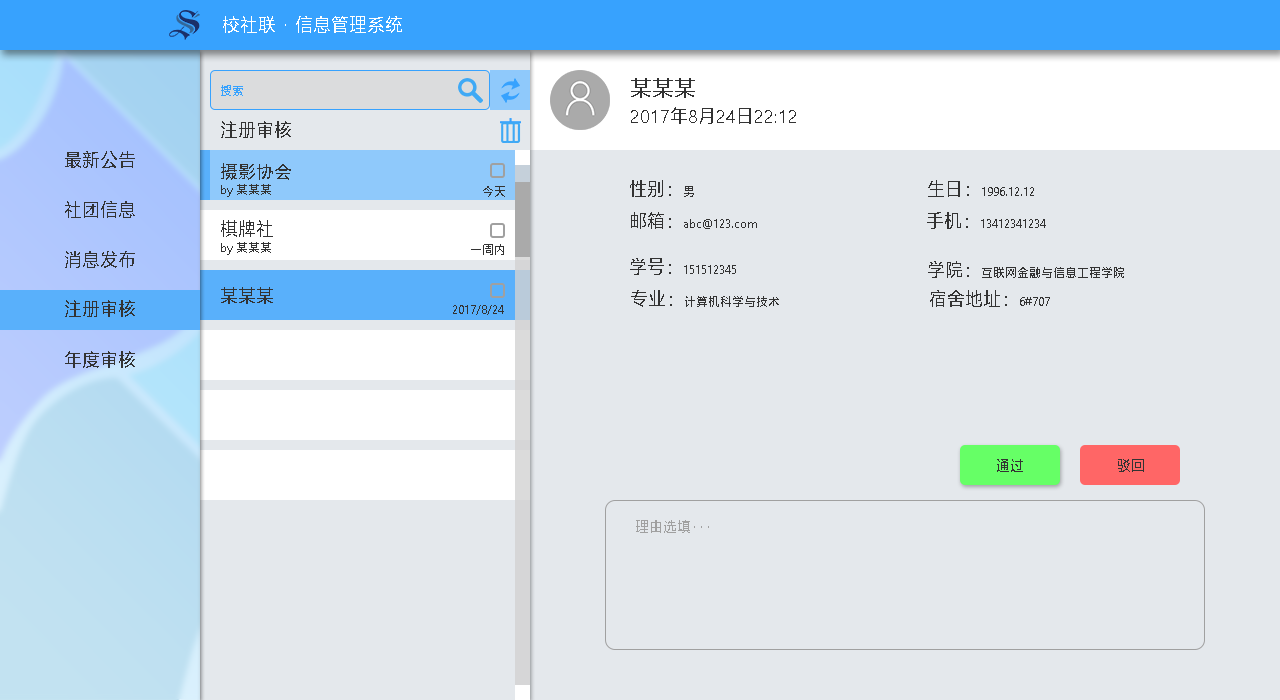
<style>
.page{position:relative;width:1280px;height:700px;background:#e4e8ec}
.page>*{position:absolute;margin:0}
.t1{font:18px "MicrosoftYaHei";color:#ffffff}
.t2{font:22px "MicrosoftYaHei";color:#333333}
.t3{font:12px "MicrosoftYaHei";color:#37a2fe}
.t4{font:18px "MicrosoftYaHei";color:#333333}
.t5{font:18px "SimHei";color:#333333}
.t6{font:12px "MicrosoftYaHei";color:#333333}
.t7{font:14px "MicrosoftYaHei";color:#333333}
.t8{font:14px "MicrosoftYaHei";color:#a0a0a0}
</style>
<div class="page">
<p class="t1" style="left:223px;top:16px;width:179px;height:17px">校社联 · 信息管理系统</p>
<p class="t2" style="left:631px;top:78px;width:64px;height:20px">某某某</p>
<p class="t3" style="left:221px;top:85px;width:22px;height:11px">搜索</p>
<p class="t4" style="left:631px;top:107px;width:165px;height:17px">2017年8月24日22:12</p>
<p class="t4" style="left:221px;top:121px;width:70px;height:17px">注册审核</p>
<p class="t4" style="left:65px;top:151px;width:70px;height:17px">最新公告</p>
<p class="t5" style="left:221px;top:163px;width:70px;height:17px">摄影协会</p>
<p class="t6" style="left:221px;top:184px;width:50px;height:13px">by 某某某</p>
<p class="t4" style="left:630px;top:180px;width:64px;height:17px">性别：<span class="t6">男</span></p>
<p class="t6" style="left:928px;top:180px;width:106px;height:17px"><span class="t4">生日：</span>1996.12.12</p>
<p class="t6" style="left:483px;top:186px;width:22px;height:11px">今天</p>
<p class="t4" style="left:65px;top:201px;width:70px;height:17px">社团信息</p>
<p class="t4" style="left:221px;top:220px;width:52px;height:17px">棋牌社</p>
<p class="t6" style="left:631px;top:212px;width:126px;height:17px"><span class="t4">邮箱：</span>abc@123.com</p>
<p class="t6" style="left:927px;top:212px;width:119px;height:17px"><span class="t4">手机：</span>13412341234</p>
<p class="t6" style="left:221px;top:242px;width:50px;height:13px">by 某某某</p>
<p class="t6" style="left:471px;top:244px;width:33px;height:11px">一周内</p>
<p class="t4" style="left:65px;top:251px;width:70px;height:17px">消息发布</p>
<p class="t6" style="left:630px;top:258px;width:106px;height:17px"><span class="t4">学号：</span>151512345</p>
<p class="t6" style="left:928px;top:261px;width:196px;height:17px"><span class="t4">学院：</span>互联网金融与信息工程学院</p>
<p class="t4" style="left:221px;top:287px;width:52px;height:17px">某某某</p>
<p class="t6" style="left:631px;top:290px;width:148px;height:17px"><span class="t4">专业：</span>计算机科学与技术</p>
<p class="t4" style="left:930px;top:290px;width:120px;height:17px">宿舍地址：<span class="t6">6#707</span></p>
<p class="t4" style="left:65px;top:300px;width:70px;height:17px">注册审核</p>
<p class="t6" style="left:453px;top:305px;width:51px;height:10px">2017/8/24</p>
<p class="t4" style="left:65px;top:351px;width:70px;height:17px">年度审核</p>
<p class="t7" style="left:997px;top:459px;width:26px;height:13px">通过</p>
<p class="t7" style="left:1118px;top:459px;width:26px;height:13px">驳回</p>
<p class="t8" style="left:636px;top:520px;width:73px;height:13px">理由选填···</p>
</div>
